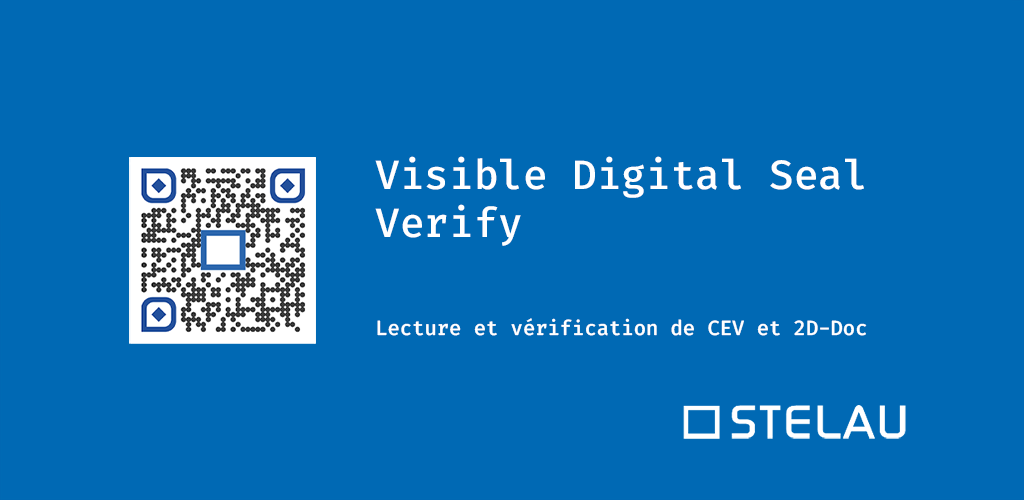
<style>
.page{position:relative;width:1024px;height:500px;background:#0069b4}
.page>*{position:absolute;margin:0}
.t1{font:40px "FiraCodeRoman-Medium";color:#ffffff}
.t2{font:20px "FiraCodeRoman-Medium";color:#ffffff}
</style>
<div class="page">
<p class="t1" style="left:375px;top:156px;width:489px;height:90px">Visible Digital Seal<br>Verify</p>
<p class="t2" style="left:377px;top:318px;width:490px;height:18px">Lecture et vérification de CEV et 2D-Doc</p>
</div>
